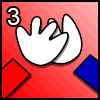
<style>
.page{position:relative;width:100px;height:100px}
.page>*{position:absolute;margin:0}
.t1{font:24px "ArialMT";color:#000000}
</style>
<div class="page">
<p class="t1" style="left:8px;top:8px;width:12px;height:17px">3</p>
</div>
